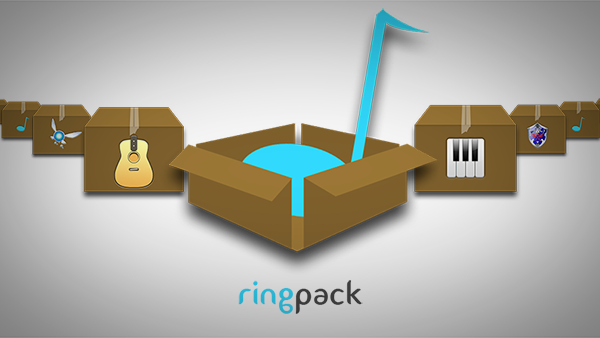
<style>
.page{position:relative;width:600px;height:338px}
.page>*{position:absolute;margin:0}
.t1{font:32.4px "Fontastique";letter-spacing:0.01em}
</style>
<div class="page">
<p class="t1" style="left:238px;top:280px;width:125px;height:34px">ringpack</p>
</div>
